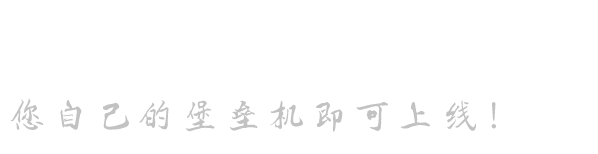
<style>
.page{position:relative;width:598px;height:154px;background:#ffffff}
.page>*{position:absolute;margin:0}
.t1{font:36px "Tensentype-TieShanKaiShuJ";letter-spacing:0.2em;color:#c2c2c2}
</style>
<div class="page">
<p class="t1" style="left:11px;top:98px;width:485px;height:34px">您自己的堡垒机即可上线！</p>
</div>
